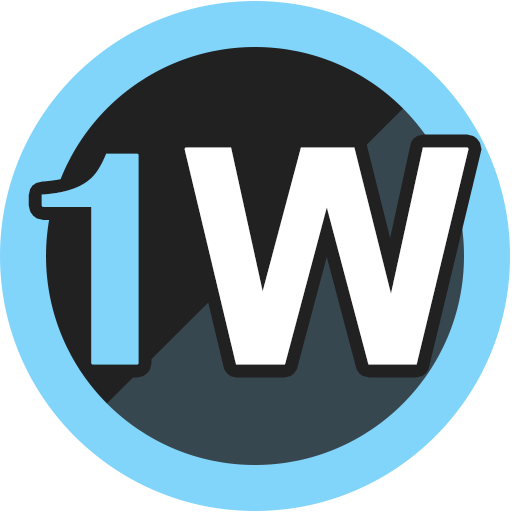
<style>
.page{position:relative;width:512px;height:512px;background:#ffffff}
.page>*{position:absolute;margin:0}
.t1{font:300px "GurmukhiMN-Bold";letter-spacing:-0.04em;color:#81d4fa;font-weight:bold}
.t2{font:300px "Arial-BoldMT";letter-spacing:-0.04em;color:#ffffff;font-weight:bold}
</style>
<div class="page">
<p class="t1" style="left:41px;top:147px;width:428px;height:218px">1<span class="t2">W</span></p>
</div>
